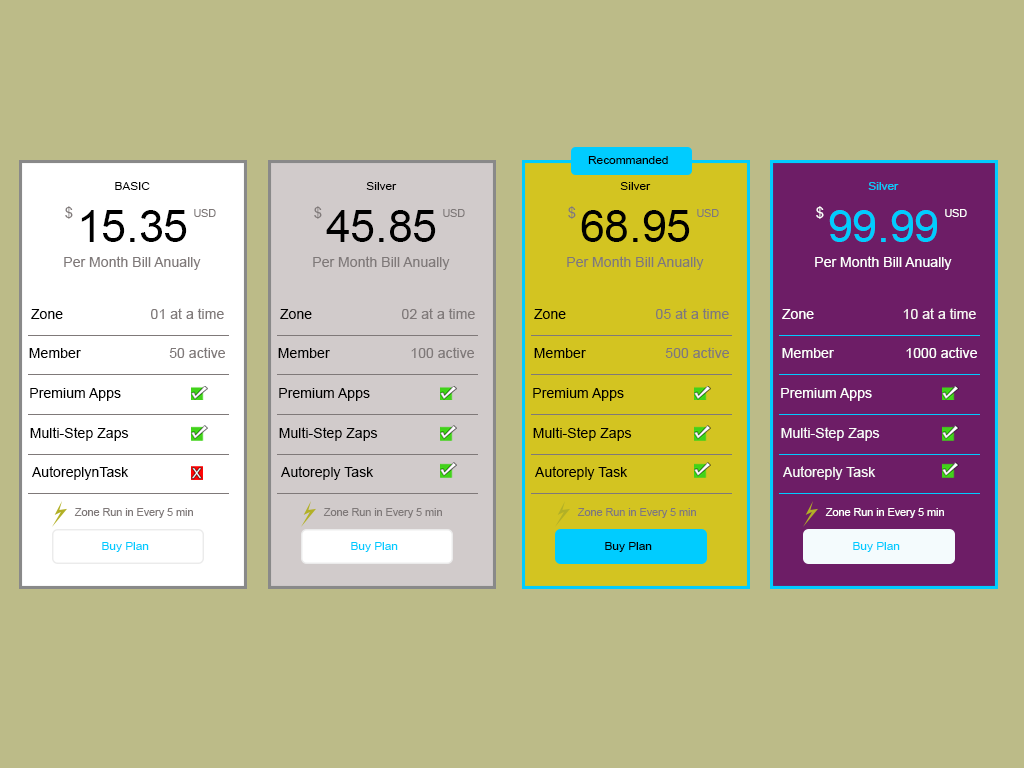
<style>
.page{position:relative;width:1024px;height:768px;background:#bcbb88}
.page>*{position:absolute;margin:0}
.t1{font:11.5px "ArialMT";color:#000000;scale:1.03 1}
.t2{font:11.5px "ArialMT";color:#00ccff;scale:1.03 1}
.t3{font:14.8px "ArialMT";color:#7f7979}
.t4{font:10.5px "ArialMT";color:#7f7979}
.t5{font:14.8px "ArialMT";color:#fffefe}
.t6{font:10.5px "ArialMT";color:#fdfdfd}
.t7{font:44.9px "ArialMT";color:#000000}
.t8{font:44.9px "ArialMT";color:#00ccff}
.t9{font:14.1px "ArialMT";color:#7f7979}
.t10{font:14.1px "ArialMT";color:#ffffff}
.t11{font:14.1px "ArialMT";color:#000000}
.t12{font:14.1px "ArialMT";color:#f8f4f4}
.t13{font:14.1px "ArialMT";color:#fdfdfd}
.t14{font:14.1px "ArialMT";color:#fefefe}
.t15{font:14.1px "ArialMT";color:#fafafa}
.t16{font:14.1px "ArialMT";color:#f8f8f8}
.t17{font:11px "ArialMT";color:#7f7979}
.t18{font:11px "ArialMT";color:#fefefe}
</style>
<div class="page">
<p class="t1" style="left:588px;top:156px;width:80px;height:8px">Recommanded</p>
<p class="t1" style="left:115px;top:182px;width:35px;height:8px">BASIC</p>
<p class="t1" style="left:366px;top:182px;width:31px;height:8px">Silver</p>
<p class="t1" style="left:620px;top:182px;width:31px;height:8px">Silver</p>
<p class="t2" style="left:868px;top:182px;width:31px;height:8px">Silver</p>
<p class="t3" style="left:65px;top:206px;width:8px;height:13px">$</p>
<p class="t4" style="left:194px;top:209px;width:22px;height:8px">USD</p>
<p class="t3" style="left:314px;top:206px;width:8px;height:13px">$</p>
<p class="t4" style="left:443px;top:209px;width:22px;height:8px">USD</p>
<p class="t3" style="left:568px;top:206px;width:8px;height:13px">$</p>
<p class="t4" style="left:697px;top:209px;width:22px;height:8px">USD</p>
<p class="t5" style="left:816px;top:206px;width:8px;height:13px">$</p>
<p class="t6" style="left:945px;top:209px;width:22px;height:8px">USD</p>
<p class="t7" style="left:81px;top:210px;width:106px;height:32px">15.35</p>
<p class="t7" style="left:326px;top:210px;width:110px;height:32px">45.85</p>
<p class="t7" style="left:581px;top:210px;width:109px;height:32px">68.95</p>
<p class="t8" style="left:829px;top:210px;width:108px;height:32px">99.99</p>
<p class="t9" style="left:64px;top:256px;width:137px;height:14px">Per Month Bill Anually</p>
<p class="t9" style="left:313px;top:256px;width:137px;height:14px">Per Month Bill Anually</p>
<p class="t9" style="left:567px;top:256px;width:137px;height:14px">Per Month Bill Anually</p>
<p class="t10" style="left:815px;top:256px;width:137px;height:14px">Per Month Bill Anually</p>
<p class="t11" style="left:31px;top:309px;width:32px;height:10px">Zone</p>
<p class="t9" style="left:151px;top:308px;width:73px;height:11px">01 at a time</p>
<p class="t11" style="left:280px;top:309px;width:32px;height:10px">Zone</p>
<p class="t9" style="left:402px;top:308px;width:73px;height:11px">02 at a time</p>
<p class="t11" style="left:534px;top:309px;width:32px;height:10px">Zone</p>
<p class="t9" style="left:656px;top:308px;width:73px;height:11px">05 at a time</p>
<p class="t10" style="left:782px;top:309px;width:32px;height:10px">Zone</p>
<p class="t12" style="left:903px;top:308px;width:73px;height:11px">10 at a time</p>
<p class="t11" style="left:29px;top:348px;width:52px;height:10px">Member</p>
<p class="t9" style="left:169px;top:347px;width:56px;height:11px">50 active</p>
<p class="t11" style="left:278px;top:348px;width:52px;height:10px">Member</p>
<p class="t9" style="left:411px;top:347px;width:63px;height:11px">100 active</p>
<p class="t11" style="left:534px;top:348px;width:52px;height:10px">Member</p>
<p class="t9" style="left:665px;top:347px;width:64px;height:11px">500 active</p>
<p class="t13" style="left:782px;top:348px;width:52px;height:10px">Member</p>
<p class="t14" style="left:906px;top:347px;width:71px;height:11px">1000 active</p>
<p class="t11" style="left:30px;top:388px;width:91px;height:13px">Premium Apps</p>
<p class="t11" style="left:279px;top:388px;width:91px;height:13px">Premium Apps</p>
<p class="t11" style="left:533px;top:388px;width:91px;height:13px">Premium Apps</p>
<p class="t13" style="left:781px;top:388px;width:91px;height:13px">Premium Apps</p>
<p class="t11" style="left:30px;top:427px;width:99px;height:14px">Multi-Step Zaps</p>
<p class="t11" style="left:279px;top:427px;width:99px;height:14px">Multi-Step Zaps</p>
<p class="t11" style="left:533px;top:427px;width:99px;height:14px">Multi-Step Zaps</p>
<p class="t15" style="left:781px;top:427px;width:99px;height:14px">Multi-Step Zaps</p>
<p class="t11" style="left:32px;top:466px;width:97px;height:14px">AutoreplynTask</p>
<p class="t11" style="left:281px;top:466px;width:93px;height:14px">Autoreply Task</p>
<p class="t11" style="left:535px;top:466px;width:93px;height:14px">Autoreply Task</p>
<p class="t16" style="left:783px;top:466px;width:93px;height:14px">Autoreply Task</p>
<p class="t17" style="left:74px;top:508px;width:119px;height:10px">Zone Run in Every 5 min</p>
<p class="t17" style="left:323px;top:508px;width:119px;height:10px">Zone Run in Every 5 min</p>
<p class="t17" style="left:577px;top:508px;width:119px;height:10px">Zone Run in Every 5 min</p>
<p class="t18" style="left:825px;top:508px;width:119px;height:10px">Zone Run in Every 5 min</p>
<p class="t2" style="left:102px;top:542px;width:47px;height:10px">Buy Plan</p>
<p class="t2" style="left:351px;top:542px;width:47px;height:10px">Buy Plan</p>
<p class="t1" style="left:605px;top:542px;width:47px;height:10px">Buy Plan</p>
<p class="t2" style="left:853px;top:542px;width:47px;height:10px">Buy Plan</p>
</div>
